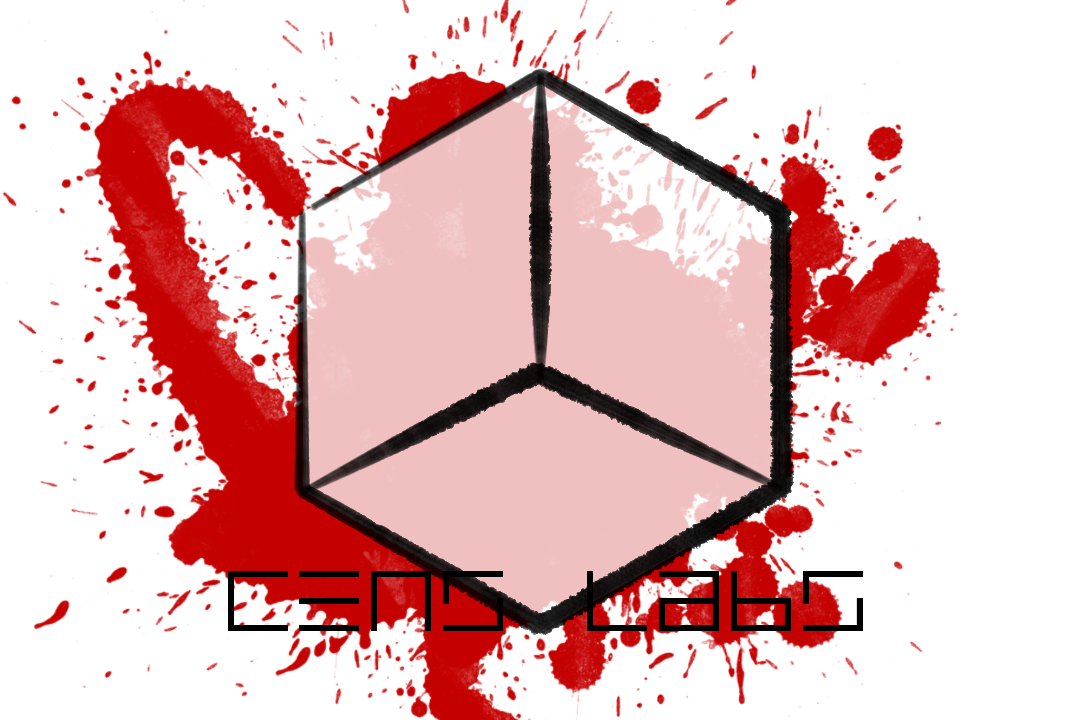
<style>
.page{position:relative;width:1080px;height:720px;background:#ffffff}
.page>*{position:absolute;margin:0}
.t1{font:72px "EppsEvansLight";color:#000000}
</style>
<div class="page">
<p class="t1" style="left:228px;top:571px;width:635px;height:60px">CENS LABS</p>
</div>
